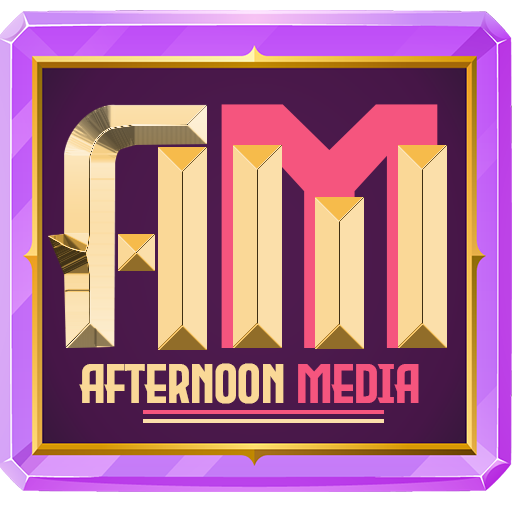
<style>
.page{position:relative;width:512px;height:512px}
.page>*{position:absolute;margin:0}
.t1{font:83.6px "EvilEmpire"}
.t2{font:13.3px "EvilEmpire";color:#fad897;scale:0.94 1}
.t3{font:13.3px "EvilEmpire";color:#f5557e;scale:0.94 1}
</style>
<div class="page">
<p class="t1" style="left:221px;top:104px;width:217px;height:244px">M</p>
<p class="t2" style="left:79px;top:363px;width:340px;height:41px">Afternoon <span class="t3">Media</span></p>
</div>
